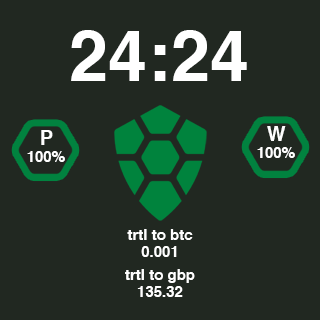
<style>
.page{position:relative;width:320px;height:320px;background:#212821}
.page>*{position:absolute;margin:0}
.t1{font:70px "Helvetica-Bold";color:#ffffff}
.t2{font:20px "Helvetica-Bold";color:#ffffff}
.t3{font:15px "Helvetica-Bold";color:#ffffff}
</style>
<div class="page">
<p class="t1" style="left:71px;top:30px;width:176px;height:51px">24:24</p>
<p class="t2" style="left:267px;top:126px;width:19px;height:15px">W</p>
<p class="t2" style="left:41px;top:130px;width:12px;height:15px">P</p>
<p class="t3" style="left:257px;top:147px;width:38px;height:11px">100%</p>
<p class="t3" style="left:27px;top:151px;width:38px;height:11px">100%</p>
<p class="t3" style="left:127px;top:229px;width:66px;height:11px">trtl to btc</p>
<p class="t3" style="left:141px;top:246px;width:36px;height:11px">0.001</p>
<p class="t3" style="left:125px;top:269px;width:70px;height:14px">trtl to gbp</p>
<p class="t3" style="left:137px;top:286px;width:46px;height:11px">135.32</p>
</div>
